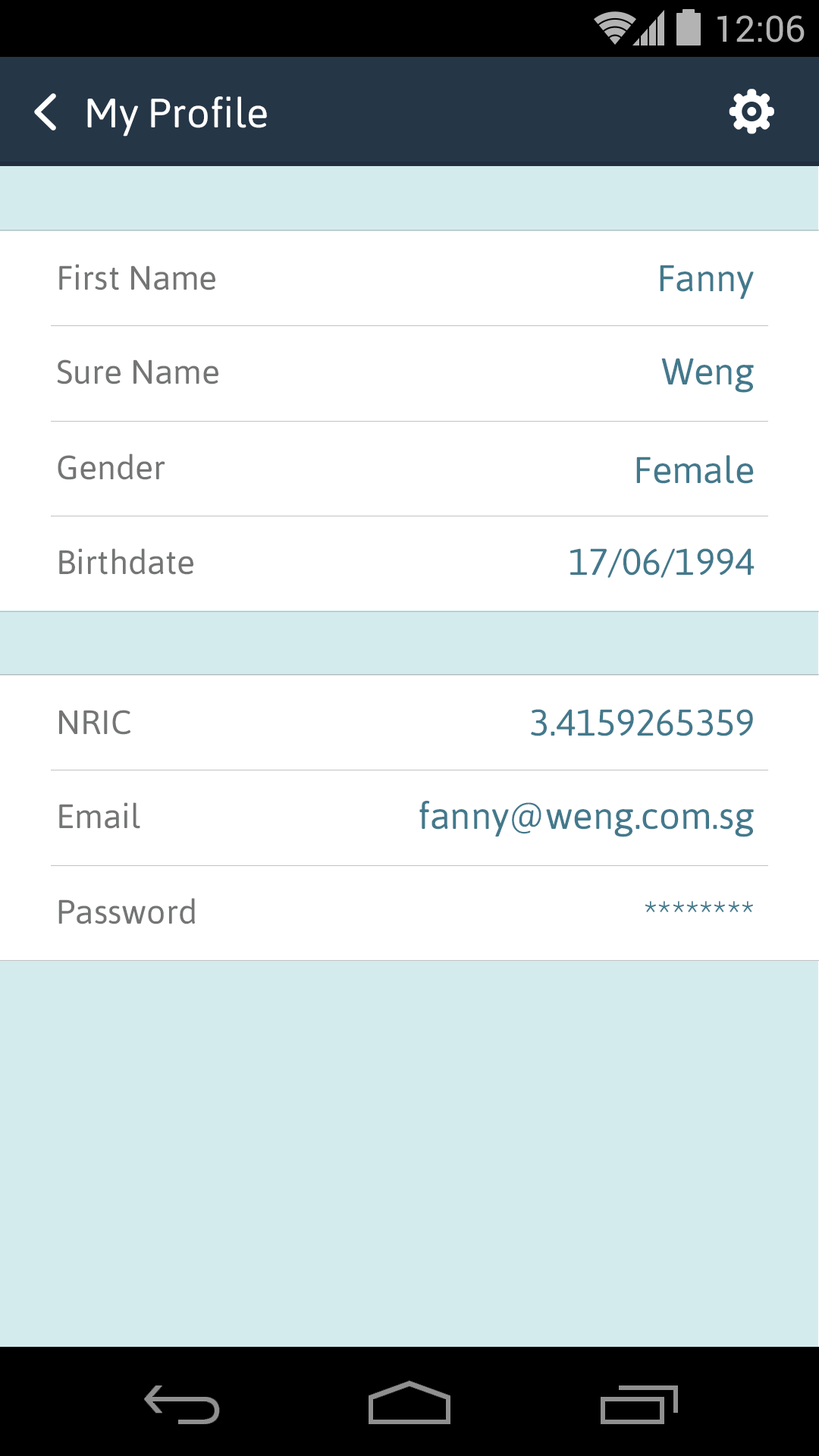
<style>
.page{position:relative;width:819px;height:1456px;background:#ffffff}
.page>*{position:absolute;margin:0}
.t1{font:40.9px "Asap-Regular";color:#ffffff}
.t2{font:33.7px "Asap-Regular";color:#747575}
.t3{font:37.1px "Asap-Regular";color:#43798c}
</style>
<div class="page">
<p class="t1" style="left:87px;top:96px;width:180px;height:40px">My Profile</p>
<p class="t2" style="left:59px;top:264px;width:156px;height:26px">First Name</p>
<p class="t3" style="left:660px;top:265px;width:94px;height:35px">Fanny</p>
<p class="t2" style="left:57px;top:359px;width:161px;height:25px">Sure Name</p>
<p class="t3" style="left:661px;top:358px;width:93px;height:35px">Weng</p>
<p class="t2" style="left:58px;top:453px;width:107px;height:27px">Gender</p>
<p class="t3" style="left:636px;top:455px;width:118px;height:29px">Female</p>
<p class="t2" style="left:59px;top:548px;width:134px;height:27px">Birthdate</p>
<p class="t3" style="left:570px;top:548px;width:185px;height:30px">17/06/1994</p>
<p class="t2" style="left:59px;top:710px;width:71px;height:25px">NRIC</p>
<p class="t3" style="left:531px;top:709px;width:222px;height:27px">3.4159265359</p>
<p class="t2" style="left:59px;top:802px;width:81px;height:27px">Email</p>
<p class="t3" style="left:419px;top:801px;width:335px;height:36px">fanny@weng.com.sg</p>
<p class="t2" style="left:58px;top:898px;width:137px;height:26px">Password</p>
<p class="t3" style="left:645px;top:901px;width:108px;height:11px">********</p>
</div>
